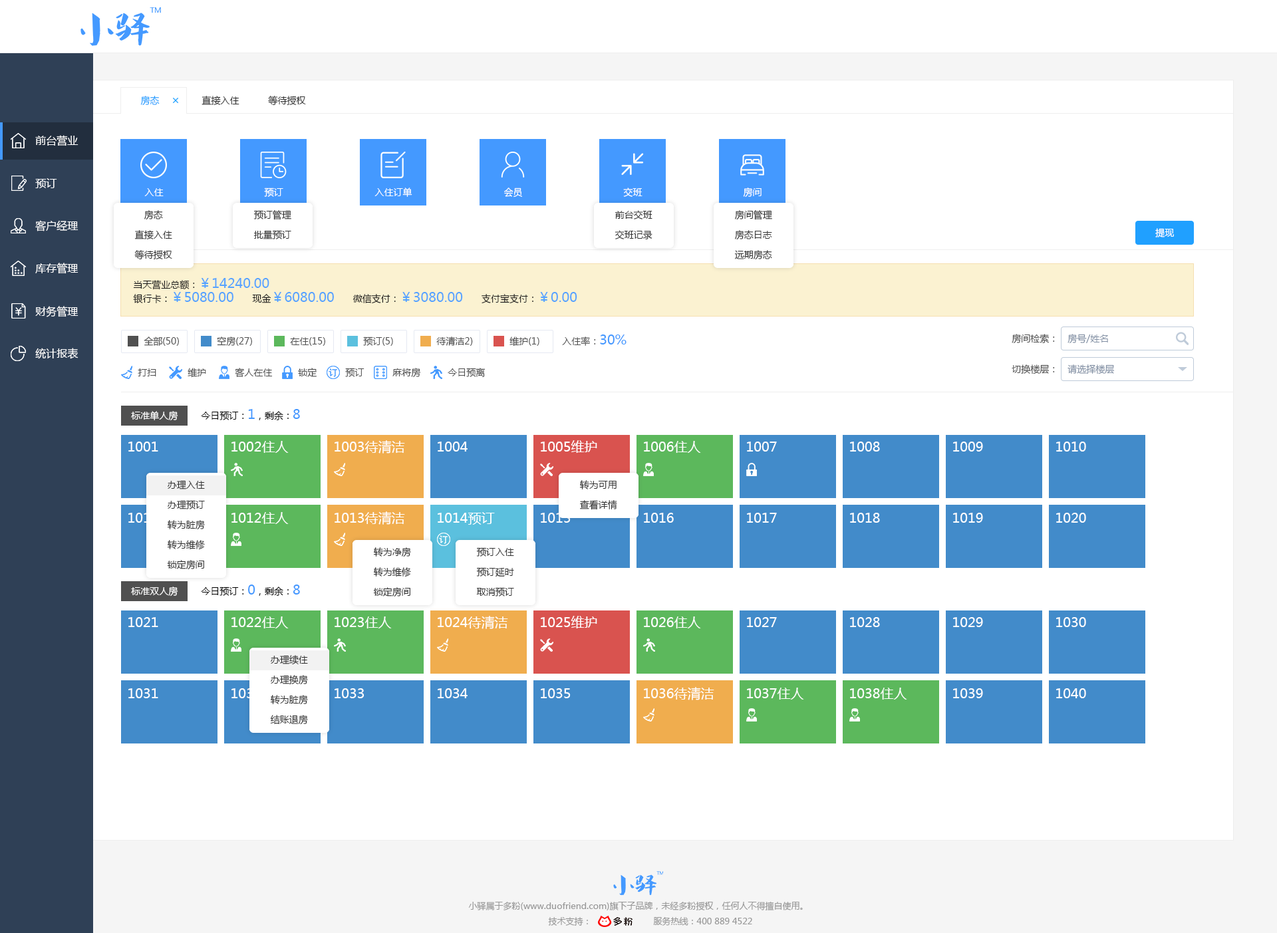
<style>
.page{position:relative;width:1277px;height:933px;background:#ffffff}
.page>*{position:absolute;margin:0}
.t1{font:9.3px "MicrosoftYaHei";color:#20a0ff}
.t2{font:9.3px "MicrosoftYaHei";color:#333333}
.t3{font:10.6px "MicrosoftYaHei";color:#ffffff}
.t4{font:9.3px "MicrosoftYaHei";color:#ffffff}
.t5{font:13.3px "MicrosoftYaHei";color:#4499ff}
.t6{font:9.3px "MicrosoftYaHei";color:#000000}
.t7{font:9.3px "MicrosoftYaHei";color:#505050}
.t8{font:9.3px "MicrosoftYaHei";color:#8391a5}
.t9{font:13.3px "MicrosoftYaHei";color:#ffffff}
.t10{font:8.6px "MicrosoftYaHei";color:#999999}
</style>
<div class="page">
<p class="t1" style="left:140px;top:96px;width:20px;height:9px">房态</p>
<p class="t2" style="left:202px;top:96px;width:38px;height:9px">直接入住</p>
<p class="t2" style="left:268px;top:96px;width:38px;height:10px">等待授权</p>
<p class="t3" style="left:35px;top:135px;width:44px;height:11px">前台营业</p>
<p class="t3" style="left:35px;top:178px;width:22px;height:10px">预订</p>
<p class="t4" style="left:144px;top:188px;width:20px;height:8px">入住</p>
<p class="t4" style="left:264px;top:188px;width:19px;height:9px">预订</p>
<p class="t4" style="left:375px;top:188px;width:38px;height:9px">入住订单</p>
<p class="t4" style="left:504px;top:188px;width:18px;height:10px">会员</p>
<p class="t4" style="left:623px;top:188px;width:20px;height:9px">交班</p>
<p class="t4" style="left:743px;top:188px;width:19px;height:9px">房间</p>
<p class="t3" style="left:35px;top:220px;width:44px;height:12px">客户经理</p>
<p class="t2" style="left:144px;top:210px;width:19px;height:10px">房态</p>
<p class="t2" style="left:253px;top:210px;width:38px;height:10px">预订管理</p>
<p class="t2" style="left:615px;top:210px;width:38px;height:10px">前台交班</p>
<p class="t2" style="left:735px;top:210px;width:37px;height:10px">房间管理</p>
<p class="t2" style="left:134px;top:230px;width:38px;height:10px">直接入住</p>
<p class="t2" style="left:253px;top:230px;width:38px;height:10px">批量预订</p>
<p class="t2" style="left:615px;top:230px;width:38px;height:10px">交班记录</p>
<p class="t2" style="left:735px;top:230px;width:37px;height:10px">房态日志</p>
<p class="t4" style="left:1156px;top:228px;width:18px;height:10px">提现</p>
<p class="t2" style="left:134px;top:250px;width:38px;height:10px">等待授权</p>
<p class="t2" style="left:735px;top:250px;width:37px;height:10px">远期房态</p>
<p class="t3" style="left:35px;top:263px;width:44px;height:11px">库存管理</p>
<p class="t5" style="left:133px;top:278px;width:136px;height:12px"><span class="t6">当天营业总额：</span>￥14240.00</p>
<p class="t5" style="left:133px;top:292px;width:445px;height:12px"><span class="t6">银行卡：</span>￥5080.00<span class="t6">　　现金</span>￥6080.00<span class="t6">　　微信支付：</span>￥3080.00<span class="t6">　　支付宝支付：</span>￥0.00</p>
<p class="t3" style="left:35px;top:306px;width:44px;height:11px">财务管理</p>
<p class="t7" style="left:144px;top:337px;width:35px;height:9px">全部(50)</p>
<p class="t7" style="left:217px;top:337px;width:35px;height:10px">空房(27)</p>
<p class="t7" style="left:290px;top:337px;width:35px;height:9px">在住(15)</p>
<p class="t7" style="left:363px;top:337px;width:30px;height:9px">预订(5)</p>
<p class="t7" style="left:436px;top:337px;width:37px;height:9px">待清洁2)</p>
<p class="t7" style="left:510px;top:337px;width:30px;height:10px">维护(1)</p>
<p class="t7" style="left:562px;top:335px;width:65px;height:11px">入住率：<span class="t5">30%</span></p>
<p class="t7" style="left:1012px;top:334px;width:43px;height:10px">房间检索：</p>
<p class="t8" style="left:1068px;top:334px;width:40px;height:10px">房号/姓名</p>
<p class="t3" style="left:35px;top:348px;width:44px;height:11px">统计报表</p>
<p class="t7" style="left:1012px;top:365px;width:43px;height:10px">切换楼层：</p>
<p class="t8" style="left:1068px;top:365px;width:47px;height:10px">请选择楼层</p>
<p class="t7" style="left:138px;top:369px;width:18px;height:8px">打扫</p>
<p class="t7" style="left:188px;top:368px;width:18px;height:10px">维护</p>
<p class="t7" style="left:235px;top:368px;width:38px;height:9px">客人在住</p>
<p class="t7" style="left:298px;top:368px;width:19px;height:9px">锁定</p>
<p class="t7" style="left:345px;top:368px;width:20px;height:9px">预订</p>
<p class="t7" style="left:393px;top:368px;width:28px;height:10px">麻将房</p>
<p class="t7" style="left:448px;top:368px;width:38px;height:9px">今日预离</p>
<p class="t4" style="left:131px;top:411px;width:47px;height:10px">标准单人房</p>
<p class="t6" style="left:201px;top:409px;width:99px;height:11px">今日预订：<span class="t5">1</span>，剩余：<span class="t5">8</span></p>
<p class="t9" style="left:128px;top:442px;width:30px;height:10px">1001</p>
<p class="t9" style="left:232px;top:441px;width:57px;height:12px">1002住人</p>
<p class="t9" style="left:335px;top:440px;width:70px;height:14px">1003待清洁</p>
<p class="t9" style="left:438px;top:442px;width:30px;height:10px">1004</p>
<p class="t9" style="left:541px;top:440px;width:56px;height:13px">1005维护</p>
<p class="t9" style="left:644px;top:441px;width:57px;height:12px">1006住人</p>
<p class="t9" style="left:747px;top:442px;width:30px;height:10px">1007</p>
<p class="t9" style="left:850px;top:442px;width:30px;height:10px">1008</p>
<p class="t9" style="left:953px;top:442px;width:30px;height:10px">1009</p>
<p class="t9" style="left:1057px;top:442px;width:29px;height:10px">1010</p>
<p class="t2" style="left:168px;top:480px;width:37px;height:10px">办理入住</p>
<p class="t2" style="left:580px;top:480px;width:37px;height:10px">转为可用</p>
<p class="t2" style="left:168px;top:500px;width:37px;height:10px">办理预订</p>
<p class="t2" style="left:580px;top:500px;width:37px;height:10px">查看详情</p>
<p class="t9" style="left:128px;top:513px;width:30px;height:10px">1011</p>
<p class="t2" style="left:167px;top:520px;width:38px;height:10px">转为脏房</p>
<p class="t9" style="left:232px;top:512px;width:57px;height:12px">1012住人</p>
<p class="t9" style="left:335px;top:512px;width:70px;height:13px">1013待清洁</p>
<p class="t9" style="left:438px;top:512px;width:57px;height:13px">1014预订</p>
<p class="t9" style="left:541px;top:513px;width:30px;height:10px">1015</p>
<p class="t9" style="left:644px;top:513px;width:30px;height:10px">1016</p>
<p class="t9" style="left:747px;top:513px;width:30px;height:10px">1017</p>
<p class="t9" style="left:850px;top:513px;width:30px;height:10px">1018</p>
<p class="t9" style="left:953px;top:513px;width:30px;height:10px">1019</p>
<p class="t9" style="left:1057px;top:513px;width:29px;height:10px">1020</p>
<p class="t2" style="left:167px;top:540px;width:38px;height:10px">转为维修</p>
<p class="t2" style="left:373px;top:548px;width:38px;height:10px">转为净房</p>
<p class="t2" style="left:476px;top:548px;width:38px;height:9px">预订入住</p>
<p class="t2" style="left:167px;top:560px;width:37px;height:10px">锁定房间</p>
<p class="t2" style="left:373px;top:568px;width:38px;height:10px">转为维修</p>
<p class="t2" style="left:476px;top:568px;width:38px;height:10px">预订延时</p>
<p class="t4" style="left:131px;top:587px;width:47px;height:10px">标准双人房</p>
<p class="t6" style="left:201px;top:585px;width:99px;height:11px">今日预订：<span class="t5">0</span>，剩余：<span class="t5">8</span></p>
<p class="t2" style="left:373px;top:587px;width:38px;height:10px">锁定房间</p>
<p class="t2" style="left:476px;top:587px;width:38px;height:10px">取消预订</p>
<p class="t9" style="left:128px;top:617px;width:30px;height:10px">1021</p>
<p class="t9" style="left:232px;top:617px;width:57px;height:12px">1022住人</p>
<p class="t9" style="left:335px;top:617px;width:57px;height:12px">1023住人</p>
<p class="t9" style="left:438px;top:616px;width:70px;height:13px">1024待清洁</p>
<p class="t9" style="left:541px;top:616px;width:56px;height:13px">1025维护</p>
<p class="t9" style="left:644px;top:617px;width:57px;height:12px">1026住人</p>
<p class="t9" style="left:747px;top:617px;width:30px;height:10px">1027</p>
<p class="t9" style="left:850px;top:617px;width:30px;height:10px">1028</p>
<p class="t9" style="left:953px;top:617px;width:30px;height:10px">1029</p>
<p class="t9" style="left:1057px;top:617px;width:29px;height:10px">1030</p>
<p class="t2" style="left:271px;top:655px;width:37px;height:10px">办理续住</p>
<p class="t2" style="left:271px;top:675px;width:37px;height:10px">办理换房</p>
<p class="t9" style="left:128px;top:689px;width:30px;height:10px">1031</p>
<p class="t9" style="left:232px;top:689px;width:29px;height:10px">1032</p>
<p class="t9" style="left:335px;top:689px;width:30px;height:10px">1033</p>
<p class="t9" style="left:438px;top:689px;width:30px;height:10px">1034</p>
<p class="t9" style="left:541px;top:689px;width:30px;height:10px">1035</p>
<p class="t9" style="left:644px;top:687px;width:71px;height:14px">1036待清洁</p>
<p class="t9" style="left:747px;top:688px;width:57px;height:12px">1037住人</p>
<p class="t9" style="left:850px;top:688px;width:58px;height:12px">1038住人</p>
<p class="t9" style="left:953px;top:689px;width:30px;height:10px">1039</p>
<p class="t9" style="left:1057px;top:689px;width:29px;height:10px">1040</p>
<p class="t2" style="left:270px;top:695px;width:38px;height:10px">转为脏房</p>
<p class="t2" style="left:270px;top:715px;width:38px;height:10px">结账退房</p>
<p class="t10" style="left:468px;top:902px;width:335px;height:9px">小驿属于多粉(www.duofriend.com)旗下子品牌，未经多粉授权，任何人不得擅自使用。</p>
<p class="t10" style="left:548px;top:917px;width:40px;height:9px">技术支持：</p>
<p class="t10" style="left:653px;top:917px;width:99px;height:9px">服务热线：400 889 4522</p>
</div>
